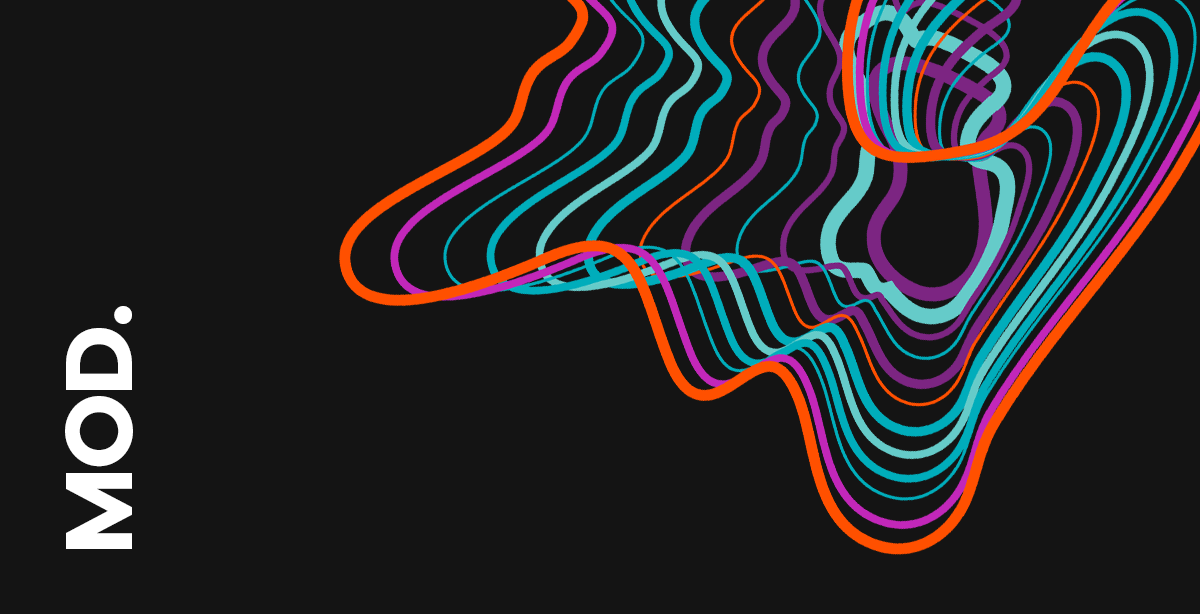
<style>
.page{position:relative;width:1200px;height:614px;background:#141414}
.page>*{position:absolute;margin:0}
.t1{font:98.4px "GalanoGrotesqueDEMO-Bold";letter-spacing:-0.025em;color:#ffffff}
</style>
<div class="page">
<p class="t1" style="left:65px;top:306px;width:68px;height:243px;rotate:-90deg">MOD.</p>
</div>
